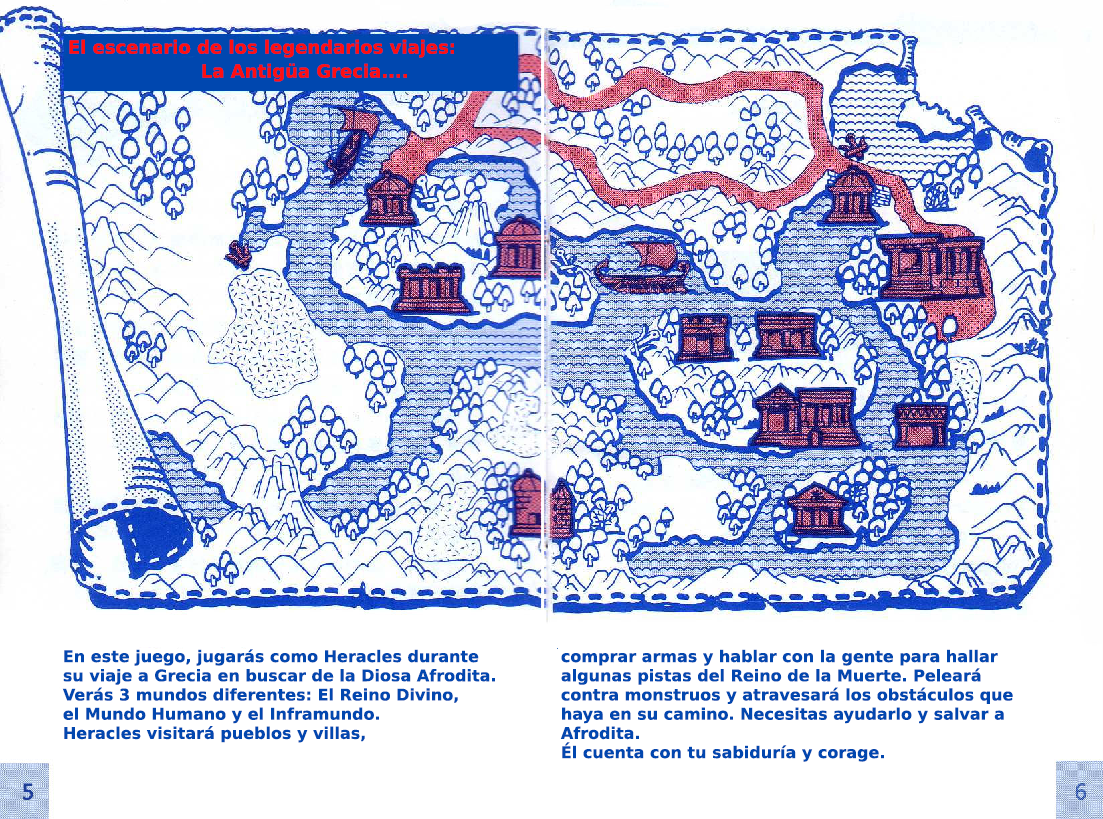
<style>
.page{position:relative;width:1103px;height:819px;background:#ffffff}
.page>*{position:absolute;margin:0}
.t1{font:18px "PrimaSansBT-Bold";color:#ff0e0f}
.t2{font:16px "PrimaSansBT-Bold";color:#0247af}
</style>
<div class="page">
<p class="t1" style="left:69px;top:39px;width:385px;height:19px">El escenario de los legendarios viajes:</p>
<p class="t1" style="left:202px;top:63px;width:205px;height:19px">La Antigüa Grecia....</p>
<p class="t2" style="left:62px;top:649px;width:433px;height:94px">En este juego, jugarás como Heracles durante<br>su viaje a Grecia en buscar de la Diosa Afrodita.<br>Verás 3 mundos diferentes: El Reino Divino,<br>el Mundo Humano y el Inframundo.<br>Heracles visitará pueblos y villas,</p>
<p class="t2" style="left:560px;top:649px;width:453px;height:113px">comprar armas y hablar con la gente para hallar<br>algunas pistas del Reino de la Muerte. Peleará <br>contra monstruos y atravesará los obstáculos que<br>haya en su camino. Necesitas ayudarlo y salvar a<br>Afrodita.<br>Él cuenta con tu sabiduría y corage.</p>
</div>
